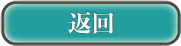
<style>
.page{position:relative;width:181px;height:46px;background:#239e9f}
.page>*{position:absolute;margin:0}
.t1{font:24px "RyuminPr6N-ExBold";color:#fff7f5}
</style>
<div class="page">
<p class="t1" style="left:68px;top:12px;width:45px;height:22px">返回</p>
</div>
